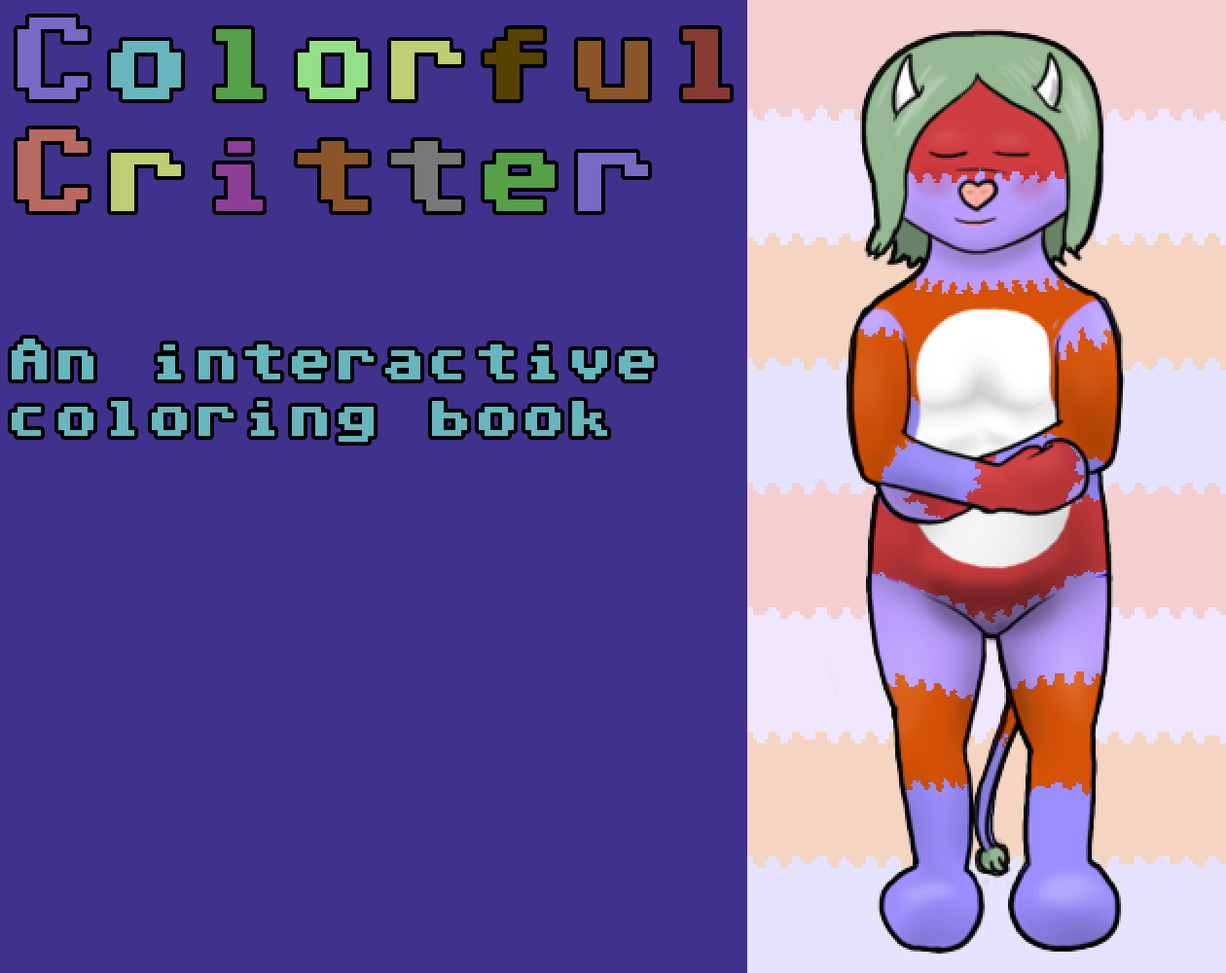
<style>
.page{position:relative;width:1226px;height:973px;background:#40318d}
.page>*{position:absolute;margin:0}
.t1{font:46.7px "C64ProMono-Style";color:#67b6bd}
.t2{font:93.4px "C64ProMono-Style";color:#7869c4}
.t3{font:93.4px "C64ProMono-Style";color:#67b6bd}
.t4{font:93.4px "C64ProMono-Style";color:#55a049}
.t5{font:93.4px "C64ProMono-Style";color:#94e089}
.t6{font:93.4px "C64ProMono-Style";color:#bfce72}
.t7{font:93.4px "C64ProMono-Style";color:#574200}
.t8{font:93.4px "C64ProMono-Style";color:#8b5429}
.t9{font:93.4px "C64ProMono-Style";color:#883932}
.t10{font:93.4px "C64ProMono-Style";color:#b86962}
.t11{font:93.4px "C64ProMono-Style";color:#8b3f96}
.t12{font:93.4px "C64ProMono-Style";color:#787878}
</style>
<div class="page">
<p class="t1" style="left:12px;top:18px;width:718px;height:424px"><span class="t2">C</span><span class="t3">o</span><span class="t4">l</span><span class="t5">o</span><span class="t6">r</span><span class="t7">f</span><span class="t8">u</span><span class="t9">l<br></span><span class="t10">C</span><span class="t6">r</span><span class="t11">i</span><span class="t8">t</span><span class="t12">t</span><span class="t4">e</span><span class="t2">r<br><br></span>An interactive<br>coloring book</p>
</div>
